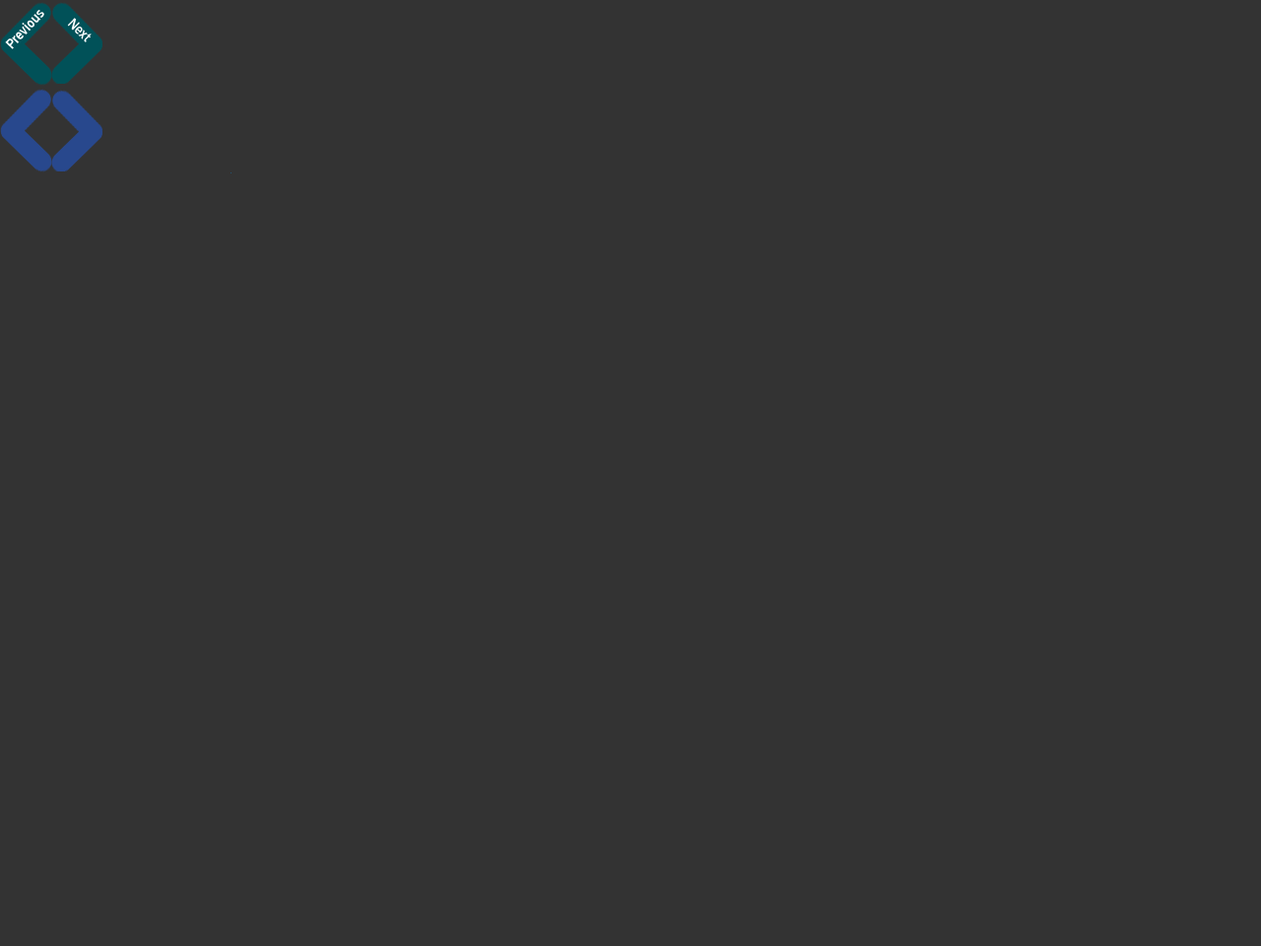
<style>
.page{position:relative;width:1261px;height:946px;background:#333333}
.page>*{position:absolute;margin:0}
.t1{font:17.7px "BlueHighway";color:#ffffff}
</style>
<div class="page">
<p class="t1" style="left:5px;top:10px;width:39px;height:39px;rotate:-47deg">Previous</p>
<p class="t1" style="left:67px;top:18px;width:25px;height:24px;rotate:44deg">Next</p>
</div>
